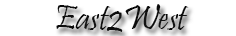
<style>
.page{position:relative;width:236px;height:36px;background:#ffffff}
.page>*{position:absolute;margin:0}
.t1{font:36px "Pristina-Regular";color:#000000}
</style>
<div class="page">
<p class="t1" style="left:56px;top:4px;width:133px;height:28px">East2West</p>
</div>
